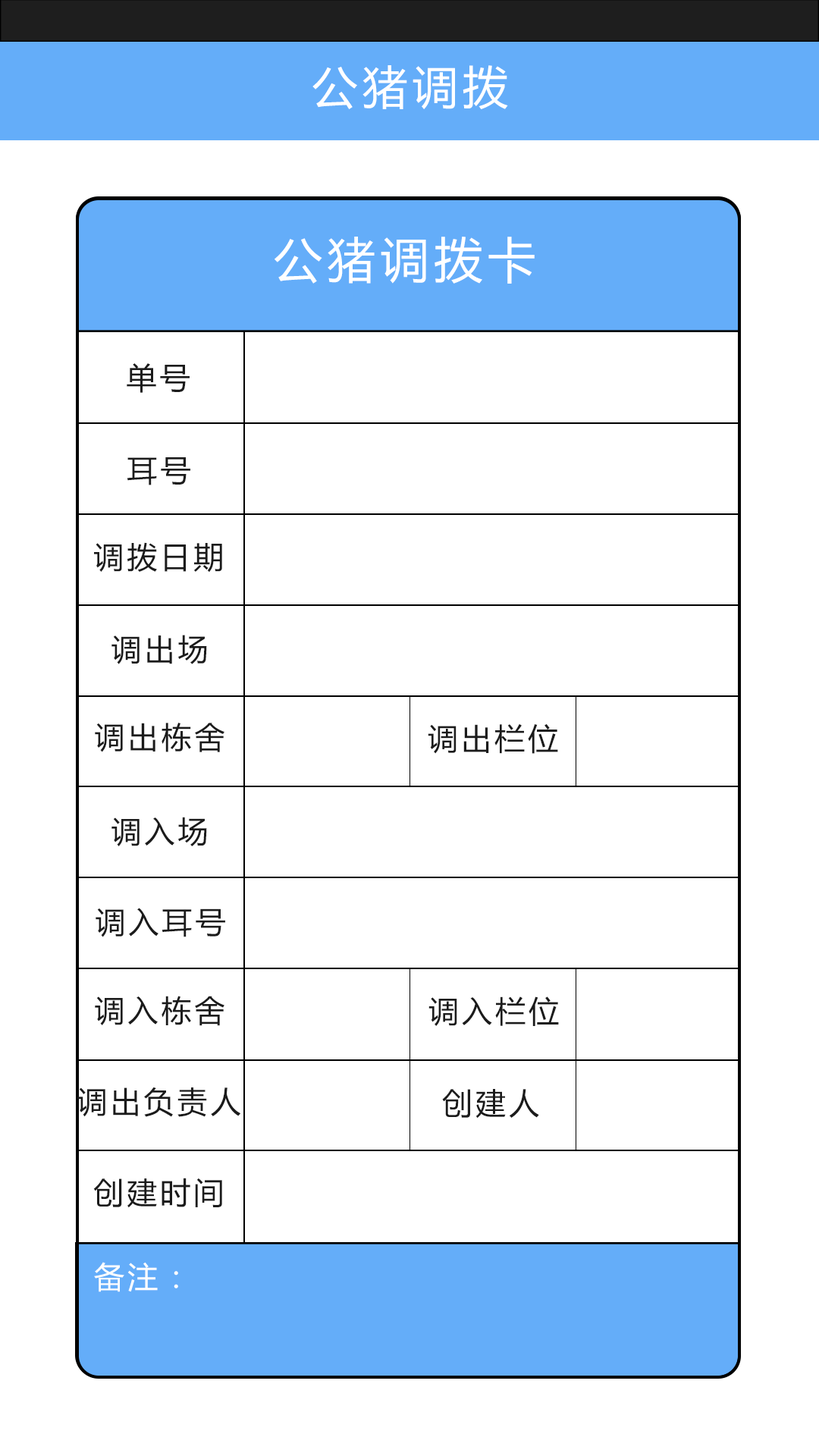
<style>
.page{position:relative;width:819px;height:1456px;background:#ffffff}
.page>*{position:absolute;margin:0}
.t1{font:45.5px "MicrosoftYaHei";letter-spacing:0.1em;color:#ffffff}
.t2{font:48.5px "MicrosoftYaHei";letter-spacing:0.1em;color:#ffffff}
.t3{font:30.3px "MicrosoftYaHei";letter-spacing:0.1em;color:#1b1b1b}
.t4{font:30.3px "MicrosoftYaHei";letter-spacing:0.1em;color:#fefefe}
</style>
<div class="page">
<p class="t1" style="left:312px;top:65px;width:196px;height:44px">公猪调拨</p>
<p class="t2" style="left:275px;top:237px;width:260px;height:47px">公猪调拨卡</p>
<p class="t3" style="left:127px;top:363px;width:63px;height:30px">单号</p>
<p class="t3" style="left:127px;top:457px;width:63px;height:28px">耳号</p>
<p class="t3" style="left:94px;top:542px;width:128px;height:31px">调拨日期</p>
<p class="t3" style="left:111px;top:635px;width:96px;height:29px">调出场</p>
<p class="t3" style="left:95px;top:723px;width:129px;height:29px">调出栋舍</p>
<p class="t3" style="left:428px;top:723px;width:130px;height:31px">调出栏位</p>
<p class="t3" style="left:111px;top:817px;width:96px;height:29px">调入场</p>
<p class="t3" style="left:96px;top:908px;width:129px;height:29px">调入耳号</p>
<p class="t3" style="left:95px;top:996px;width:129px;height:30px">调入栋舍</p>
<p class="t3" style="left:428px;top:996px;width:131px;height:30px">调入栏位</p>
<p class="t3" style="left:77px;top:1087px;width:164px;height:30px">调出负责人</p>
<p class="t3" style="left:442px;top:1089px;width:97px;height:30px">创建人</p>
<p class="t3" style="left:93px;top:1178px;width:129px;height:30px">创建时间</p>
<p class="t4" style="left:94px;top:1262px;width:84px;height:30px">备注：</p>
</div>
